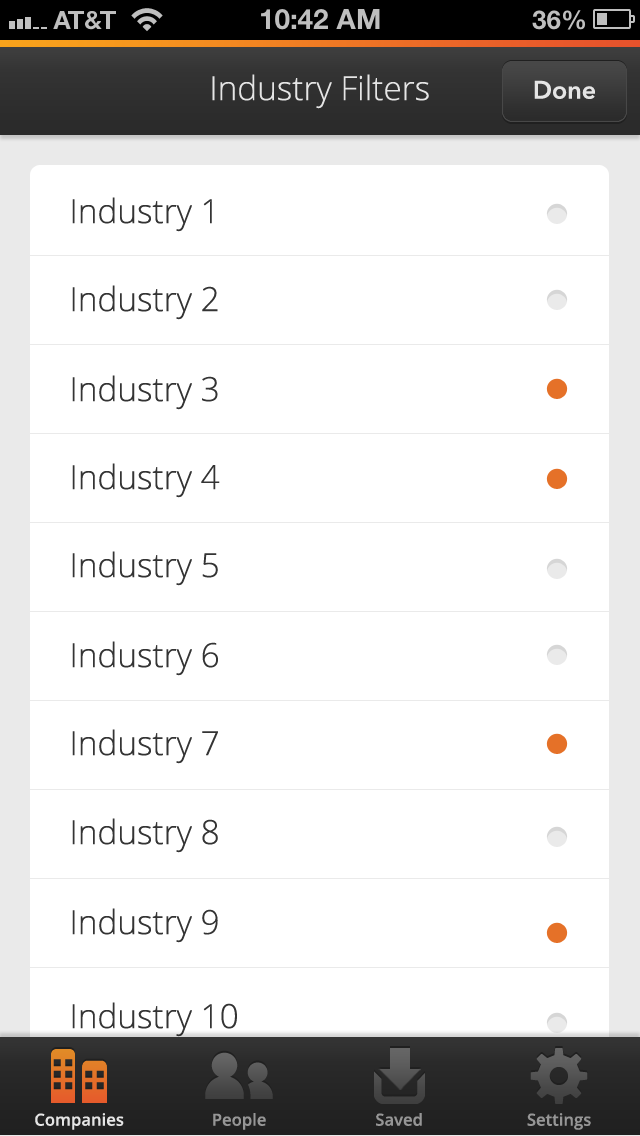
<style>
.page{position:relative;width:640px;height:1136px;background:#ffffff}
.page>*{position:absolute;margin:0}
.t1{font:33.3px "OpenSans-Light";color:#e5e5e5}
.t2{font:25px "AvenirNext-DemiBold";color:#e5e5e5}
.t3{font:33.3px "OpenSans-Light";color:#343434}
.t4{font:16.7px "OpenSans-Semibold";color:#e5e5e5}
.t5{font:16.7px "OpenSans-Semibold";color:#969696}
</style>
<div class="page">
<p class="t1" style="left:212px;top:74px;width:217px;height:35px">Industry Filters</p>
<p class="t2" style="left:534px;top:80px;width:61px;height:19px">Done</p>
<p class="t3" style="left:72px;top:197px;width:140px;height:35px">Industry 1</p>
<p class="t3" style="left:72px;top:285px;width:146px;height:35px">Industry 2</p>
<p class="t3" style="left:72px;top:375px;width:146px;height:35px">Industry 3</p>
<p class="t3" style="left:72px;top:463px;width:148px;height:35px">Industry 4</p>
<p class="t3" style="left:72px;top:551px;width:146px;height:35px">Industry 5</p>
<p class="t3" style="left:72px;top:641px;width:146px;height:35px">Industry 6</p>
<p class="t3" style="left:72px;top:729px;width:146px;height:35px">Industry 7</p>
<p class="t3" style="left:72px;top:818px;width:146px;height:35px">Industry 8</p>
<p class="t3" style="left:72px;top:908px;width:146px;height:35px">Industry 9</p>
<p class="t3" style="left:72px;top:1002px;width:165px;height:35px">Industry 10</p>
<p class="t4" style="left:35px;top:1113px;width:89px;height:17px">Companies</p>
<p class="t5" style="left:213px;top:1113px;width:53px;height:17px">People</p>
<p class="t5" style="left:376px;top:1113px;width:46px;height:13px">Saved</p>
<p class="t5" style="left:527px;top:1113px;width:64px;height:17px">Settings</p>
</div>
